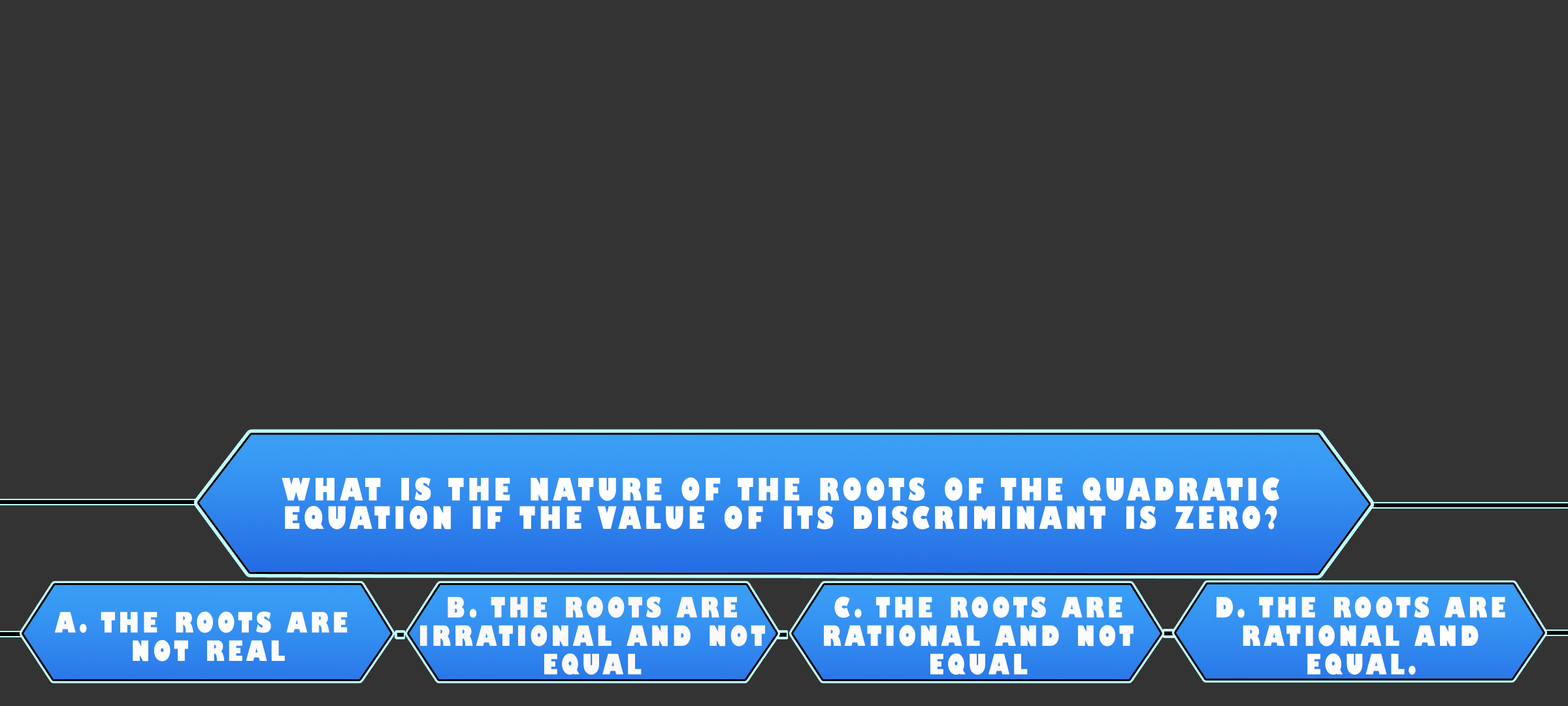
<style>
.page{position:relative;width:1568px;height:706px;background:#333333}
.page>*{position:absolute;margin:0}
.t1{font:30px/28.4px "GillSans-UltraBoldCondensed";letter-spacing:0.115em;color:#ffffff;text-transform:uppercase;scale:1.12 1}
.t2{font:27.2px/28.4px "GillSans-UltraBoldCondensed";letter-spacing:0.115em;color:#fcf9f9;text-transform:uppercase;scale:1.12 1}
.t3{font:27.2px/28.4px "GillSans-UltraBoldCondensed";letter-spacing:0.115em;color:#fdfcfc;text-transform:uppercase;scale:1.12 1}
.t4{font:27.2px/28.4px "GillSans-UltraBoldCondensed";letter-spacing:0.115em;color:#fffdfd;text-transform:uppercase;scale:1.12 1}
.t5{font:27.2px/28.4px "GillSans-UltraBoldCondensed";letter-spacing:0.115em;color:#fdfdfd;text-transform:uppercase;scale:1.12 1}
</style>
<div class="page">
<p class="t1" style="left:282px;top:477px;width:997px;height:52px;text-align:center">What is the nature of the roots of the quadratic<br>equation if the value of its discriminant is zero?</p>
<p class="t2" style="left:420px;top:596px;width:345px;height:78px;text-align:center">B. The roots are<br>irrational and not<br>equal</p>
<p class="t3" style="left:824px;top:596px;width:310px;height:78px;text-align:center">C. The roots are<br>rational and not<br>equal</p>
<p class="t4" style="left:1217px;top:596px;width:288px;height:78px;text-align:center">D. The roots are<br>rational and<br>equal.</p>
<p class="t5" style="left:55px;top:611px;width:293px;height:50px;text-align:center">A. The roots are<br> not real</p>
</div>
